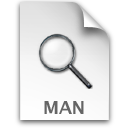
<style>
.page{position:relative;width:128px;height:128px;background:#ffffff}
.page>*{position:absolute;margin:0}
.t1{font:18px "LucidaGrande-Bold";letter-spacing:-0.02em;color:#656565}
</style>
<div class="page">
<p class="t1" style="left:44px;top:101px;width:40px;height:13px">MAN</p>
</div>
